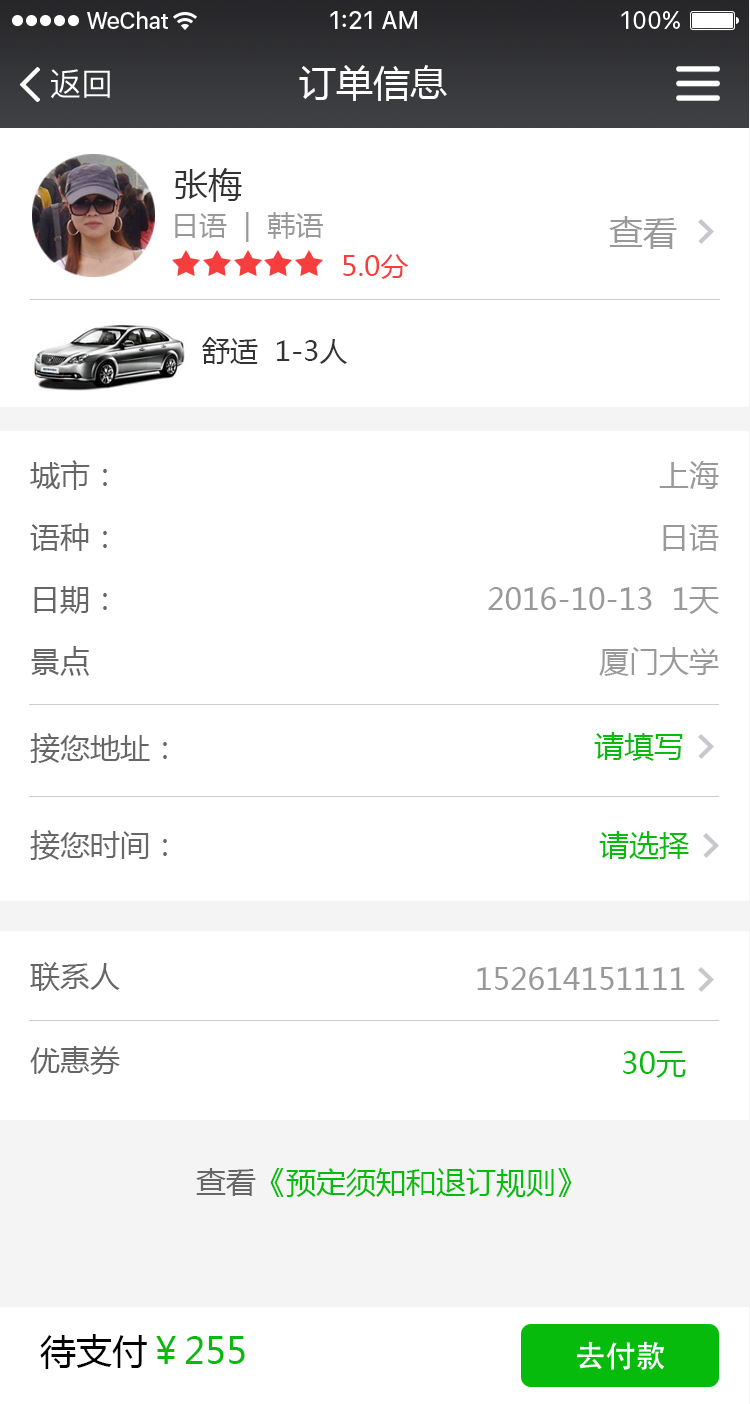
<style>
.page{position:relative;width:750px;height:1404px;background:#ffffff}
.page>*{position:absolute;margin:0}
.t1{font:37px "MicrosoftYaHei";color:#ffffff}
.t2{font:32px "PingFangSC-Regular";color:#ffffff}
.t3{font:34px "MicrosoftYaHei";color:#333333}
.t4{font:28px "MicrosoftYaHei";color:#999999}
.t5{font:34px "MicrosoftYaHei";color:#999999}
.t6{font:28px "MicrosoftYaHei";color:#f73e3e}
.t7{font:28px "MicrosoftYaHei";color:#333333}
.t8{font:30px/66px "MicrosoftYaHei";color:#666666}
.t9{font:30px/66px "MicrosoftYaHei";color:#999999}
.t10{font:30px "MicrosoftYaHei";color:#666666}
.t11{font:30px "MicrosoftYaHei";color:#06bb0c}
.t12{font:30px/88px "MicrosoftYaHei";color:#666666}
.t13{font:30px/88px "MicrosoftYaHei";color:#999999}
.t14{font:30px/88px "MicrosoftYaHei";color:#06bb0c}
.t15{font:36px "MicrosoftYaHei";color:#06bb0c}
.t16{font:36px "MicrosoftYaHei";color:#000000}
.t17{font:30px "AdobeHeitiStd-Regular";color:#ffffff}
</style>
<div class="page">
<p class="t1" style="left:299px;top:65px;width:148px;height:36px">订单信息</p>
<p class="t2" style="left:51px;top:69px;width:59px;height:30px">返回</p>
<p class="t3" style="left:175px;top:168px;width:67px;height:34px">张梅</p>
<p class="t4" style="left:175px;top:212px;width:148px;height:30px">日语  |  韩语</p>
<p class="t5" style="left:609px;top:216px;width:68px;height:33px">查看</p>
<p class="t6" style="left:343px;top:254px;width:66px;height:25px">5.0分</p>
<p class="t7" style="left:202px;top:337px;width:146px;height:27px">舒适  1-3人</p>
<p class="t8" style="left:30px;top:460px;width:77px;height:216px">城市：<br>语种：<br>日期：<br>景点</p>
<p class="t9" style="left:488px;top:461px;width:231px;height:215px;text-align:right">上海<br>日语<br>2016-10-13  1天<br>厦门大学</p>
<p class="t10" style="left:30px;top:733px;width:137px;height:30px">接您地址：</p>
<p class="t11" style="left:594px;top:732px;width:89px;height:29px">请填写</p>
<p class="t10" style="left:30px;top:830px;width:137px;height:30px">接您时间：</p>
<p class="t11" style="left:599px;top:831px;width:90px;height:28px">请选择</p>
<p class="t12" style="left:30px;top:962px;width:90px;height:113px">联系人<br>优惠券</p>
<p class="t13" style="left:477px;top:967px;width:209px;height:111px;text-align:right">152614151111<br><span class="t14">30元</span></p>
<p class="t11" style="left:196px;top:1168px;width:376px;height:30px"><span class="t10">查看</span>《预定须知和退订规则》</p>
<p class="t15" style="left:40px;top:1334px;width:205px;height:35px"><span class="t16">待支付</span>￥255</p>
<p class="t17" style="left:577px;top:1341px;width:87px;height:29px">去付款</p>
</div>
